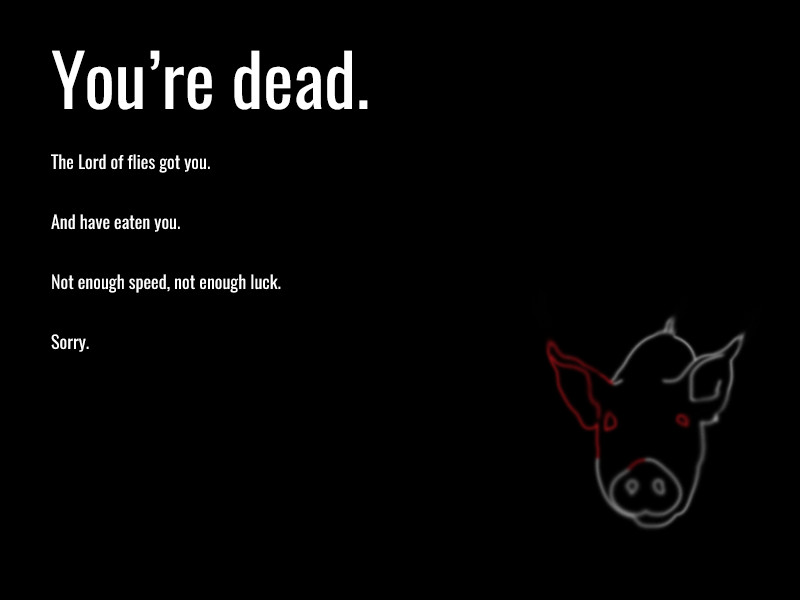
<style>
.page{position:relative;width:800px;height:600px;background:#000000}
.page>*{position:absolute;margin:0}
.t1{font:18px/60px "Oswald-Regular";color:#ffffff}
.t2{font:72px/60px "Oswald-Regular";color:#ffffff}
</style>
<div class="page">
<p class="t1" style="left:51px;top:50px;width:317px;height:302px"><span class="t2">You’re dead.<br></span>The Lord of flies got you. <br>And have eaten you.<br>Not enough speed, not enough luck.<br>Sorry.</p>
</div>
